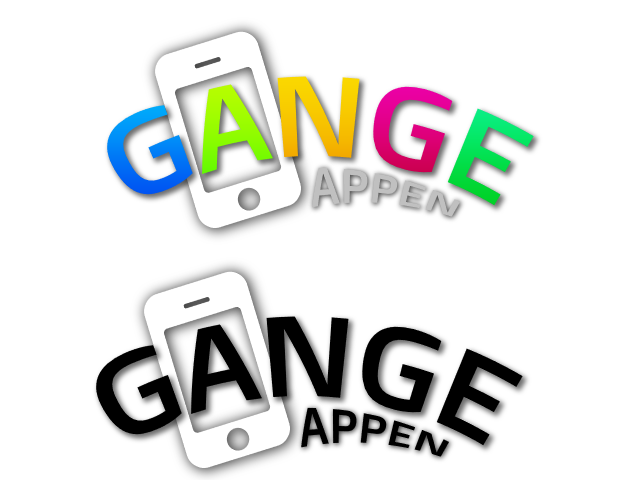
<style>
.page{position:relative;width:640px;height:480px;background:#ffffff}
.page>*{position:absolute;margin:0}
.t1{font:114px "DoppioOne-Regular"}
.t2{font:114px "DoppioOne-Regular";color:#000000}
.t3{font:39.6px "DoppioOne-Regular";color:#000000;scale:1.16 1}
</style>
<div class="page">
<p class="t1" style="left:106px;top:76px;width:428px;height:130px">GANGE</p>
<p class="t2" style="left:95px;top:316px;width:428px;height:130px">GANGE</p>
<p class="t3" style="left:301px;top:407px;width:149px;height:50px;rotate:12deg">APPEN</p>
</div>
